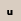
<style>
.page{position:relative;width:21px;height:21px;background:#d9cdc1}
.page>*{position:absolute;margin:0}
.t1{font:9px "Tahoma-Bold";color:#000000}
</style>
<div class="page">
<p class="t1" style="left:7px;top:10px;width:6px;height:5px">u</p>
</div>
